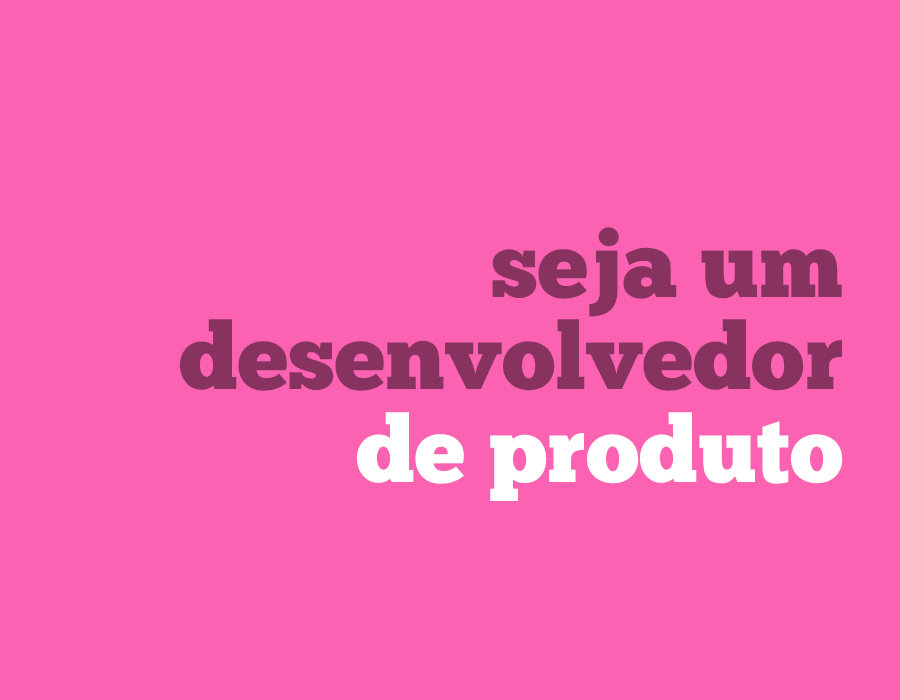
<style>
.page{position:relative;width:900px;height:700px;background:#fc62b2}
.page>*{position:absolute;margin:0}
.t1{font:93.2px/92.6px "ChunkFive-Roman";color:#88335f}
.t2{font:93.2px/92.6px "ChunkFive-Roman";color:#ffffff}
</style>
<div class="page">
<p class="t1" style="left:180px;top:227px;width:663px;height:274px;text-align:right">seja um<br>desenvolvedor<br><span class="t2"> de produto</span></p>
</div>
